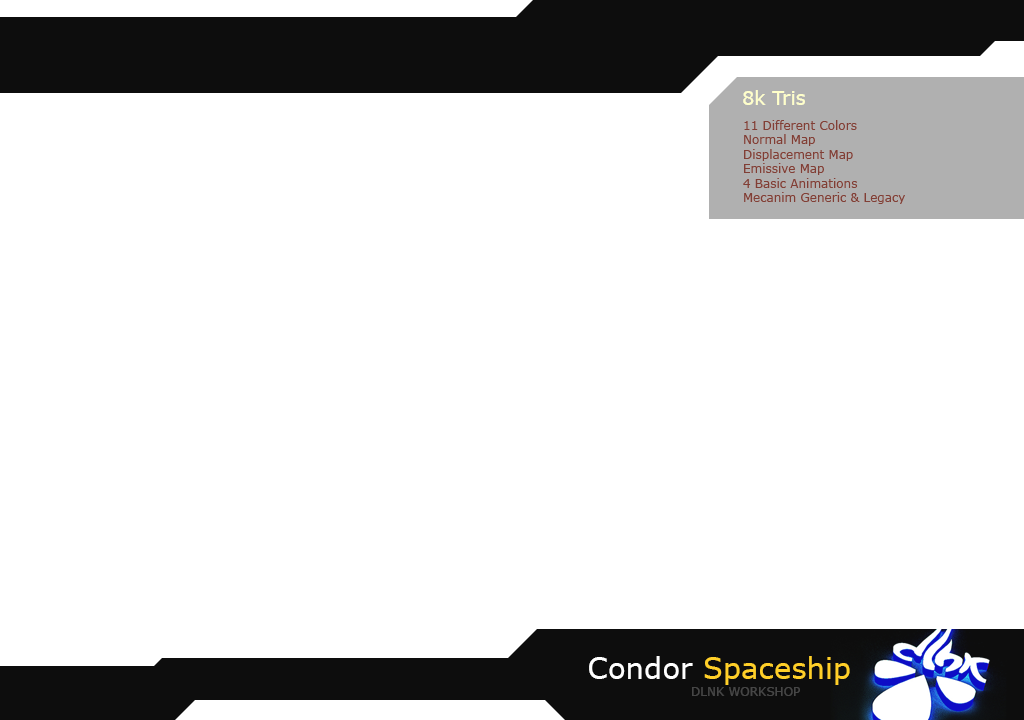
<style>
.page{position:relative;width:1024px;height:720px;background:#ffffff}
.page>*{position:absolute;margin:0}
.t1{font:19.1px "Verdana";color:#ffffc9}
.t2{font:12px "Verdana";color:#803f36}
.t3{font:29.2px "Verdana";color:#ffcf28}
.t4{font:29.2px "Verdana";color:#ffffff}
.t5{font:12px "Verdana";color:#464646}
</style>
<div class="page">
<p class="t1" style="left:743px;top:90px;width:62px;height:15px">8k Tris</p>
<p class="t2" style="left:743px;top:120px;width:162px;height:84px">11 Different Colors<br>Normal Map<br>Displacement Map<br>Emissive Map<br>4 Basic Animations<br>Mecanim Generic &amp; Legacy</p>
<p class="t3" style="left:589px;top:656px;width:261px;height:29px"><span class="t4">Condor </span>Spaceship</p>
<p class="t5" style="left:692px;top:687px;width:108px;height:9px">DLNK WORKSHOP</p>
</div>
